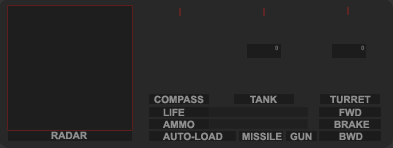
<style>
.page{position:relative;width:393px;height:148px;background:#282828}
.page>*{position:absolute;margin:0}
.t1{font:6px "Arial-BoldMT";color:#616161}
.t2{font:10px "Arial-BoldMT";color:#8f8f8f}
</style>
<div class="page">
<p class="t1" style="left:275px;top:45px;width:4px;height:6px">0</p>
<p class="t1" style="left:361px;top:45px;width:4px;height:6px">0</p>
<p class="t2" style="left:154px;top:95px;width:50px;height:9px">COMPASS</p>
<p class="t2" style="left:250px;top:95px;width:28px;height:8px">TANK</p>
<p class="t2" style="left:330px;top:95px;width:41px;height:9px">TURRET</p>
<p class="t2" style="left:163px;top:108px;width:22px;height:8px">LIFE</p>
<p class="t2" style="left:339px;top:108px;width:23px;height:8px">FWD</p>
<p class="t2" style="left:163px;top:120px;width:32px;height:9px">AMMO</p>
<p class="t2" style="left:334px;top:120px;width:36px;height:9px">BRAKE</p>
<p class="t2" style="left:51px;top:131px;width:37px;height:9px">RADAR</p>
<p class="t2" style="left:163px;top:132px;width:60px;height:9px">AUTO-LOAD</p>
<p class="t2" style="left:242px;top:132px;width:40px;height:9px">MISSILE</p>
<p class="t2" style="left:290px;top:132px;width:22px;height:9px">GUN</p>
<p class="t2" style="left:339px;top:132px;width:24px;height:8px">BWD</p>
</div>
